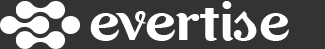
<style>
.page{position:relative;width:325px;height:49px;background:#333333}
.page>*{position:absolute;margin:0}
.t1{font:73px "DreamwoodDEMO-Regular";color:#ffffff;scale:0.96 1}
</style>
<div class="page">
<p class="t1" style="left:90px;top:1px;width:199px;height:40px">evertise</p>
</div>
